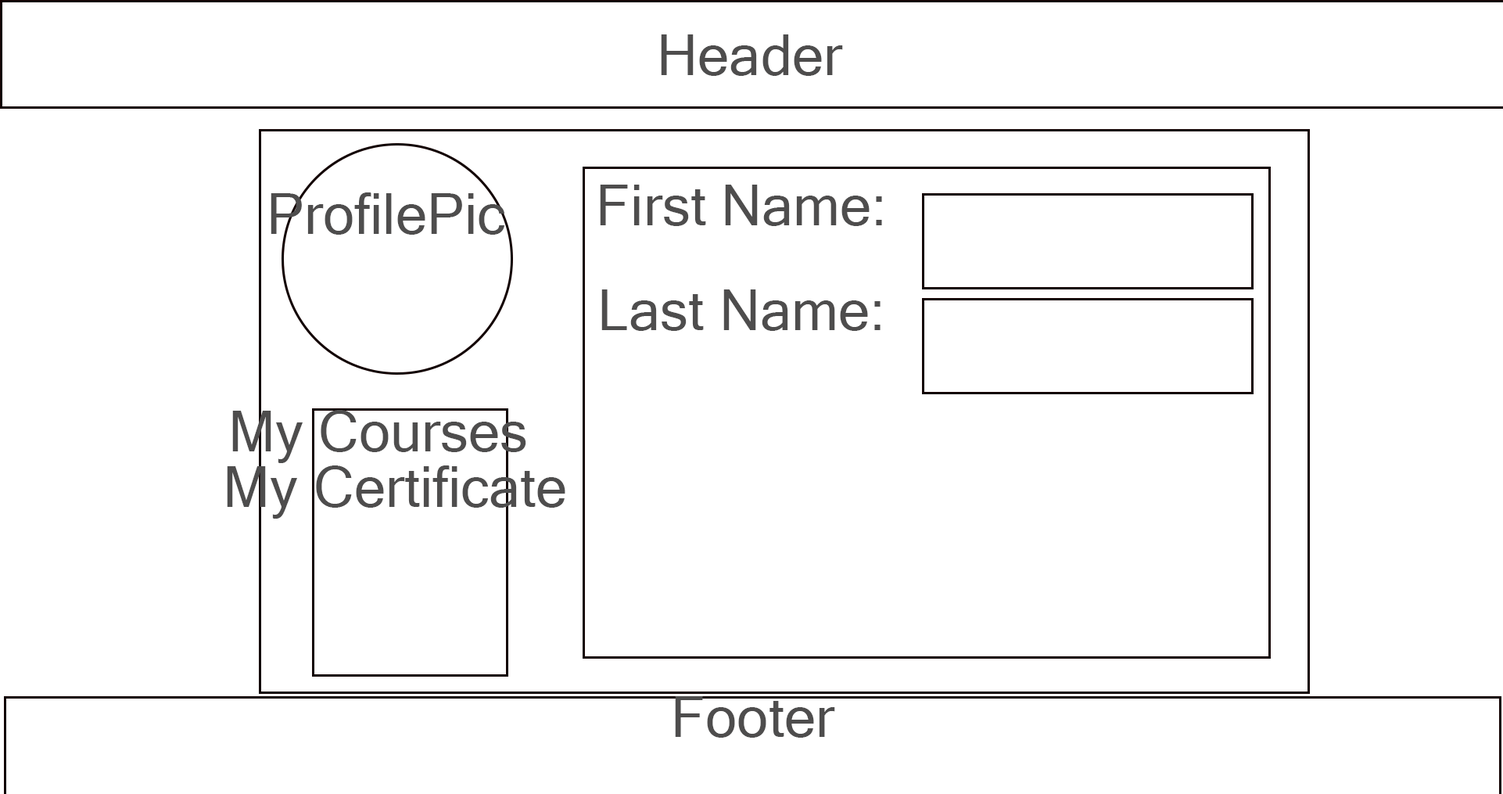
<style>
.page{position:relative;width:1503px;height:794px;background:#ffffff}
.page>*{position:absolute;margin:0}
.t1{font:56.3px "MicrosoftSansSerif";color:#4e4d4d}
</style>
<div class="page">
<p class="t1" style="left:661px;top:34px;width:182px;height:42px">Header</p>
<p class="t1" style="left:600px;top:185px;width:282px;height:41px">First Name:</p>
<p class="t1" style="left:271px;top:192px;width:233px;height:43px">ProfilePic</p>
<p class="t1" style="left:601px;top:289px;width:279px;height:42px">Last Name:</p>
<p class="t1" style="left:232px;top:410px;width:294px;height:53px">My Courses</p>
<p class="t1" style="left:227px;top:465px;width:338px;height:53px">My Certificate</p>
<p class="t1" style="left:675px;top:696px;width:160px;height:41px">Footer</p>
</div>
